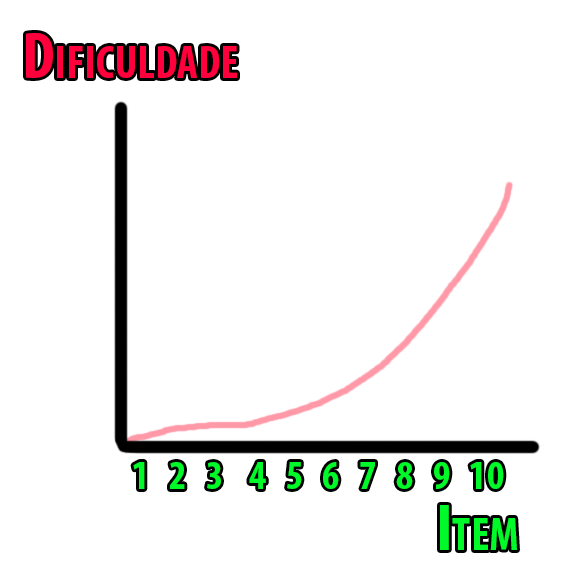
<style>
.page{position:relative;width:567px;height:567px;background:#ffffff}
.page>*{position:absolute;margin:0}
.t1{font:66.1px "MyriadPro-BoldCond";color:#ff003d;font-variant:small-caps}
.t2{font:40.5px "MyriadPro-BoldCond";color:#00fa29;font-variant:small-caps}
.t3{font:66.1px "MyriadPro-BoldCond";color:#00fa29;font-variant:small-caps}
</style>
<div class="page">
<p class="t1" style="left:26px;top:33px;width:211px;height:45px">Dificuldade</p>
<p class="t2" style="left:133px;top:462px;width:371px;height:27px">1   2   3    4   5   6   7   8   9   10</p>
<p class="t3" style="left:440px;top:505px;width:77px;height:45px">Item</p>
</div>
